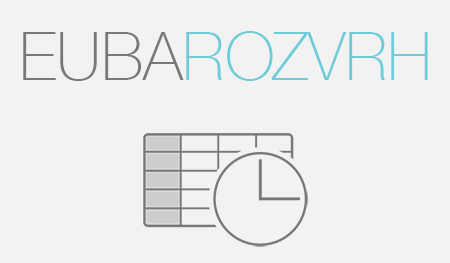
<style>
.page{position:relative;width:450px;height:263px;background:#f2f2f2}
.page>*{position:absolute;margin:0}
.t1{font:66.9px "HelveticaNeue-Thin";color:#6eccd9}
.t2{font:66.9px "HelveticaNeue-Thin";color:#787878}
</style>
<div class="page">
<p class="t1" style="left:23px;top:31px;width:405px;height:50px"><span class="t2">EUBA</span>ROZVRH</p>
</div>
